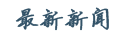
<style>
.page{position:relative;width:129px;height:36px;background:#ffffff}
.page>*{position:absolute;margin:0}
.t1{font:24px "Jyinbixinsu";color:#335368;font-weight:bold}
</style>
<div class="page">
<p class="t1" style="left:15px;top:7px;width:94px;height:24px">最新新闻</p>
</div>
